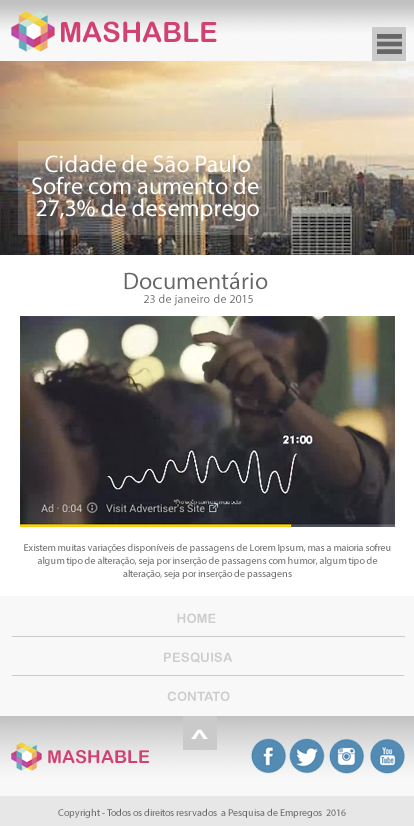
<style>
.page{position:relative;width:414px;height:826px}
.page>*{position:absolute;margin:0}
.t1{font:28px "ArialRoundedMTBold";color:#d24173}
.t2{font:24px/22px "MyriadPro-Regular";color:#ffffff}
.t3{font:24px "MyriadPro-Regular";color:#666666}
.t4{font:12px "MyriadPro-Regular";color:#666666}
.t5{font:10px/13px "MyriadPro-Regular";color:#666666}
.t6{font:13px "ArialRoundedMTBold";color:#cccccc}
.t7{font:18px "ArialRoundedMTBold";color:#d24173}
.t8{font:10px "MyriadPro-Regular";color:#666666}
</style>
<div class="page">
<p class="t1" style="left:61px;top:21px;width:156px;height:22px">MASHABLE</p>
<p class="t2" style="left:32px;top:155px;width:227px;height:66px;text-align:center">Cidade de São Paulo<br>Sofre com aumento de <br>27,3% de desemprego</p>
<p class="t3" style="left:124px;top:272px;width:144px;height:18px">Documentário</p>
<p class="t4" style="left:144px;top:294px;width:109px;height:12px">23 de janeiro de 2015</p>
<p class="t5" style="left:24px;top:543px;width:367px;height:36px;text-align:center">Existem muitas variações disponíveis de passagens de Lorem Ipsum, mas a maioria sofreu algum tipo de alteração, seja por inserção de passagens com humor, algum tipo de alteração, seja por inserção de passagens</p>
<p class="t6" style="left:177px;top:613px;width:39px;height:10px">HOME</p>
<p class="t6" style="left:164px;top:652px;width:68px;height:11px">PESQUISA</p>
<p class="t6" style="left:167px;top:691px;width:63px;height:10px">CONTATO</p>
<p class="t7" style="left:48px;top:750px;width:102px;height:14px">MASHABLE</p>
<p class="t8" style="left:58px;top:808px;width:288px;height:10px">Copyright - Todos os direitos resrvados  a Pesquisa de Empregos  2016</p>
</div>
